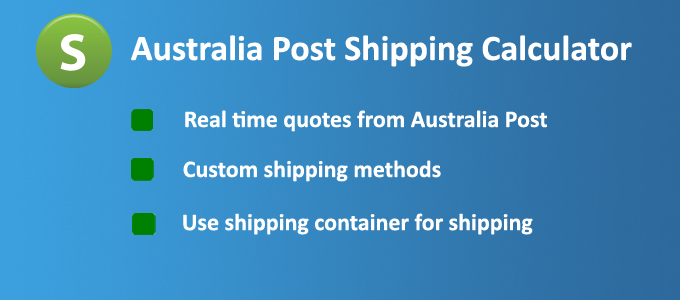
<style>
.page{position:relative;width:680px;height:300px}
.page>*{position:absolute;margin:0}
.t1{font:36px "Calibri-Bold";color:#ffffff}
.t2{font:24px "Calibri-Bold";color:#ffffff}
</style>
<div class="page">
<p class="t1" style="left:131px;top:35px;width:501px;height:32px">Australia Post Shipping Calculator</p>
<p class="t2" style="left:185px;top:110px;width:362px;height:22px">Real time quotes from Australia Post</p>
<p class="t2" style="left:183px;top:160px;width:258px;height:22px">Custom shipping methods</p>
<p class="t2" style="left:183px;top:213px;width:350px;height:22px">Use shipping container for shipping</p>
</div>
